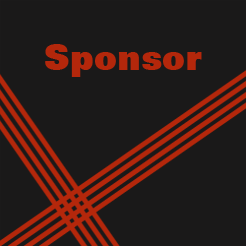
<style>
.page{position:relative;width:246px;height:246px;background:#1a1919}
.page>*{position:absolute;margin:0}
.t1{font:35.4px "ZurichBT-ExtraBlack";color:#b4270b}
</style>
<div class="page">
<p class="t1" style="left:45px;top:44px;width:157px;height:33px">Sponsor</p>
</div>
